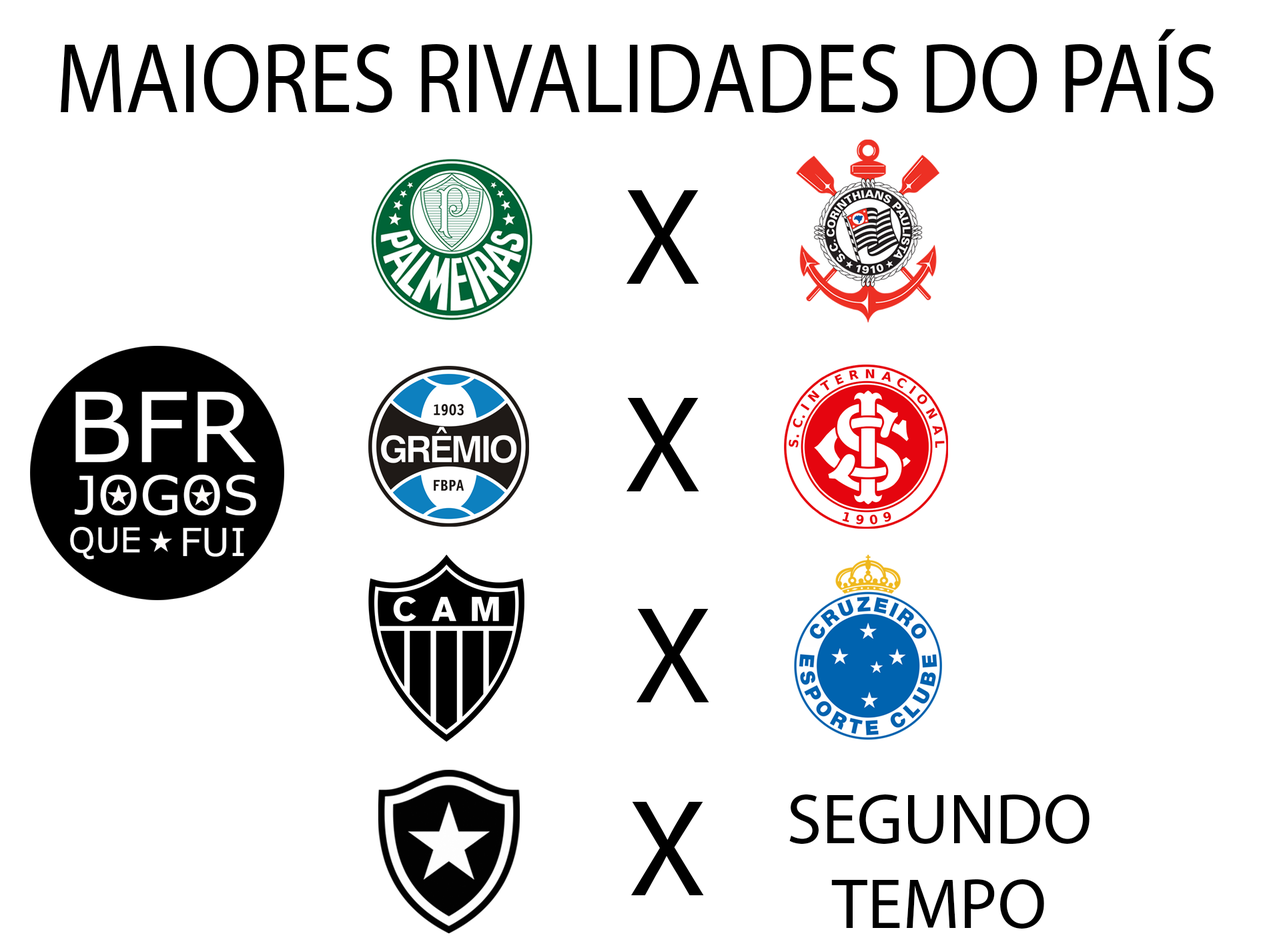
<style>
.page{position:relative;width:1261px;height:946px;background:#ffffff}
.page>*{position:absolute;margin:0}
.t1{font:100.3px "MyriadPro-Regular";color:#000000;scale:0.88 1}
.t2{font:139px "MyriadPro-Regular";color:#000000}
.t3{font:71.1px "MyriadPro-Regular";color:#000000}
</style>
<div class="page">
<p class="t1" style="left:61px;top:29px;width:1153px;height:84px">MAIORES RIVALIDADES DO PAÍS</p>
<p class="t2" style="left:627px;top:190px;width:72px;height:94px">X</p>
<p class="t2" style="left:627px;top:398px;width:72px;height:93px">X</p>
<p class="t2" style="left:637px;top:609px;width:72px;height:93px">X</p>
<p class="t3" style="left:789px;top:793px;width:301px;height:135px;text-align:center">SEGUNDO TEMPO</p>
<p class="t2" style="left:631px;top:801px;width:73px;height:94px">X</p>
</div>
